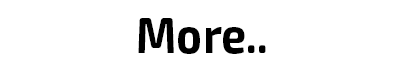
<style>
.page{position:relative;width:396px;height:74px;background:#ffffff}
.page>*{position:absolute;margin:0}
.t1{font:51px "Exo2-Bold";color:#000000;scale:0.87 1}
</style>
<div class="page">
<p class="t1" style="left:138px;top:18px;width:128px;height:36px">More..<br>DACADggemy</p>
</div>
